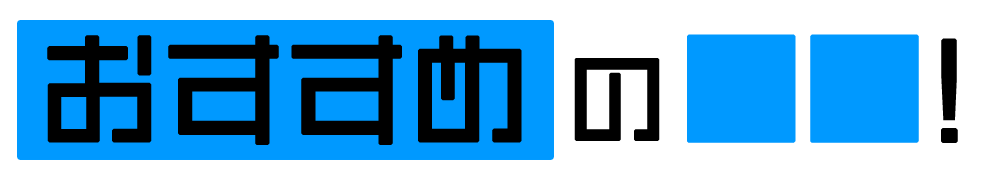
<style>
.page{position:relative;width:1000px;height:180px;background:#ffffff}
.page>*{position:absolute;margin:0}
.t1{font:120px "VDL-LineG-Regular";color:#000000;font-weight:bold}
.t2{font:100px "VDL-LineG-Regular";color:#000000;font-weight:bold}
.t3{font:120px "VDL-LineG-Regular";color:#0099ff;font-weight:bold}
</style>
<div class="page">
<p class="t1" style="left:47px;top:34px;width:911px;height:111px">おすすめ<span class="t2">の</span><span class="t3">■■</span>!</p>
</div>
